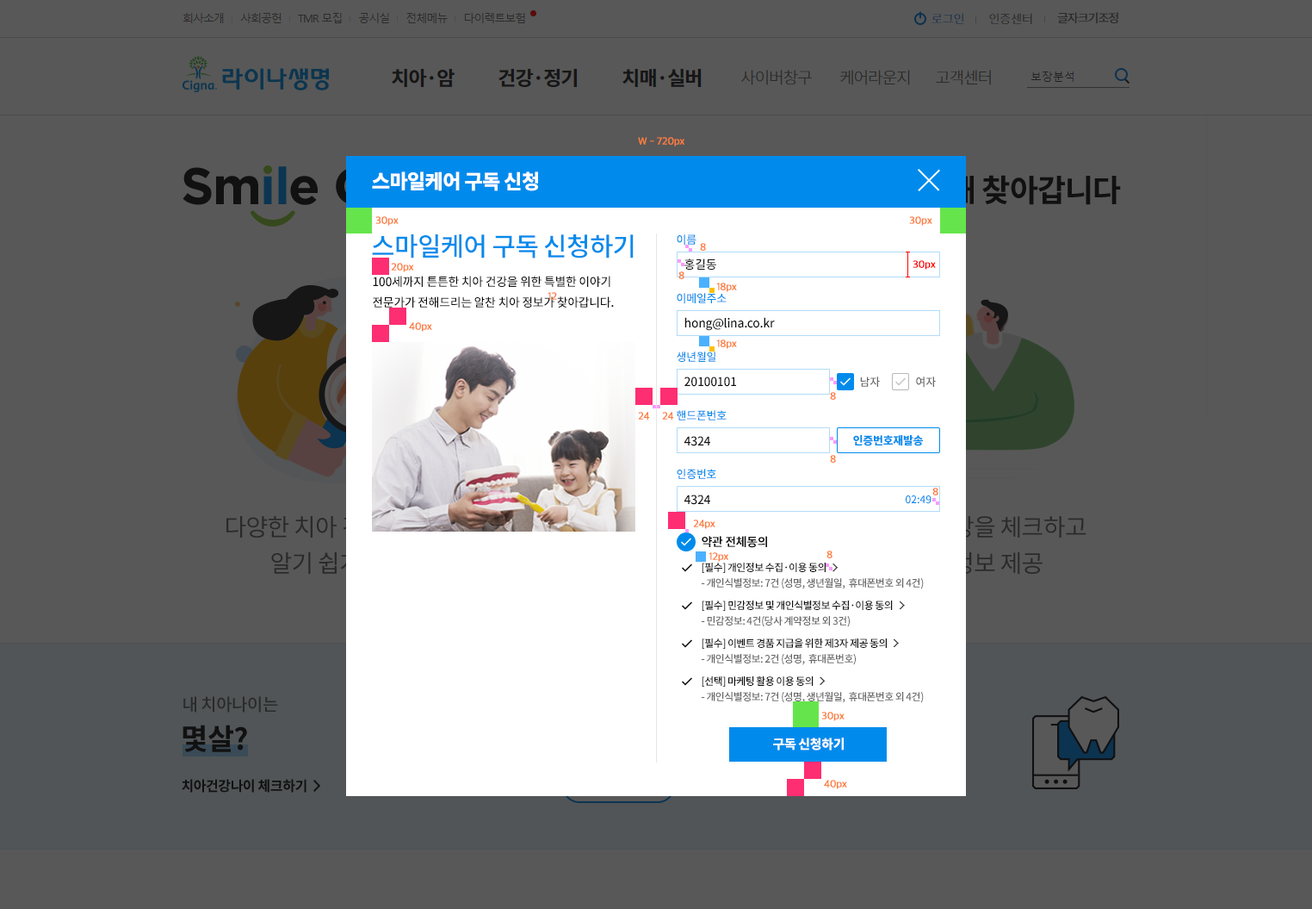
<style>
.page{position:relative;width:1312px;height:909px;background:#585858}
.page>*{position:absolute;margin:0}
.t1{font:10.3px "AppleSDGothicNeoR00";letter-spacing:-0.025em;color:#fd7d3e;font-weight:bold}
.t2{font:19.8px "NotoSansCJKkr-Black";letter-spacing:-0.025em;color:#ffffff}
.t3{font:25.8px "NotoSansCJKkr-Medium";letter-spacing:-0.025em;color:#008bec}
.t4{font:11.2px/58.6px "NotoSansCJKkr-Medium";letter-spacing:-0.025em;color:#008bec}
.t5{font:12.1px "NotoSansCJKkr-Medium";letter-spacing:-0.025em;color:#111111}
.t6{font:10.3px "AppleSDGothicNeoR00";letter-spacing:-0.025em;color:#ff0000;font-weight:bold}
.t7{font:12.1px/20.7px "NotoSansCJKkr-Medium";letter-spacing:-0.025em;color:#111111}
.t8{font:11.2px "NotoSansCJKkr-Medium";letter-spacing:-0.025em;color:#666666}
.t9{font:11.2px "NotoSansCJKkr-Black";letter-spacing:-0.025em;color:#008bec}
.t10{font:10.3px "NotoSansCJKkr-Medium";letter-spacing:-0.01em;color:#008bec}
.t11{font:12.1px "NotoSansCJKkr-Bold";letter-spacing:-0.025em;color:#111111}
.t12{font:10.3px/15.5px "NotoSansCJKkr-Medium";letter-spacing:-0.05em;color:#666666}
.t13{font:10.3px/22.4px "NotoSansCJKkr-Medium";letter-spacing:-0.05em;color:#111111}
.t14{font:12.9px "NotoSansCJKkr-Black";letter-spacing:-0.025em;color:#ffffff}
</style>
<div class="page">
<p class="t1" style="left:638px;top:137px;width:47px;height:9px">W - 720px</p>
<p class="t2" style="left:372px;top:171px;width:166px;height:20px">스마일케어 구독 신청</p>
<p class="t1" style="left:375px;top:216px;width:24px;height:10px">30px</p>
<p class="t1" style="left:909px;top:216px;width:24px;height:10px">30px</p>
<p class="t3" style="left:372px;top:234px;width:262px;height:24px">스마일케어 구독 신청하기</p>
<p class="t4" style="left:677px;top:234px;width:50px;height:245px">이름<br>이메일주소<br>생년월일<br>핸드폰번호<br>인증번호</p>
<p class="t1" style="left:700px;top:243px;width:6px;height:8px">8</p>
<p class="t1" style="left:391px;top:263px;width:23px;height:9px">20px</p>
<p class="t5" style="left:685px;top:258px;width:32px;height:12px">홍길동</p>
<p class="t6" style="left:913px;top:260px;width:23px;height:10px">30px</p>
<p class="t7" style="left:373px;top:276px;width:241px;height:32px">100세까지 튼튼한 치아 건강을 위한 특별한 이야기<br>전문가가 전해드리는 알찬 치아 정보가 찾아갑니다.</p>
<p class="t1" style="left:679px;top:271px;width:6px;height:8px">8</p>
<p class="t1" style="left:548px;top:292px;width:9px;height:8px">12</p>
<p class="t1" style="left:717px;top:282px;width:20px;height:10px">18px</p>
<p class="t5" style="left:685px;top:317px;width:90px;height:14px">hong@lina.co.kr</p>
<p class="t1" style="left:409px;top:322px;width:23px;height:10px">40px</p>
<p class="t1" style="left:717px;top:339px;width:20px;height:10px">18px</p>
<p class="t5" style="left:685px;top:376px;width:51px;height:11px">20100101</p>
<p class="t8" style="left:860px;top:376px;width:76px;height:12px">남자                여자</p>
<p class="t1" style="left:830px;top:392px;width:6px;height:8px">8</p>
<p class="t1" style="left:638px;top:412px;width:12px;height:7px">24</p>
<p class="t1" style="left:662px;top:412px;width:12px;height:7px">24</p>
<p class="t5" style="left:684px;top:436px;width:26px;height:10px">4324</p>
<p class="t9" style="left:853px;top:435px;width:70px;height:11px">인증번호재발송</p>
<p class="t1" style="left:830px;top:455px;width:6px;height:7px">8</p>
<p class="t5" style="left:684px;top:494px;width:26px;height:11px">4324</p>
<p class="t10" style="left:906px;top:495px;width:26px;height:9px">02:49</p>
<p class="t1" style="left:933px;top:487px;width:6px;height:8px">8</p>
<p class="t1" style="left:693px;top:519px;width:23px;height:10px">24px</p>
<p class="t11" style="left:702px;top:536px;width:65px;height:12px">약관 전체동의</p>
<p class="t11" style="left:702px;top:536px;width:65px;height:12px">약관 전체동의</p>
<p class="t1" style="left:709px;top:552px;width:20px;height:9px">12px</p>
<p class="t1" style="left:827px;top:550px;width:6px;height:8px">8</p>
<p class="t12" style="left:702px;top:562px;width:222px;height:141px"><span class="t13">[필수] 개인정보 수집·이용 동의<br></span>- 개인식별정보: 7건 (성명, 생년월일,  휴대폰번호 외 4건)<br><span class="t13">[필수] 민감정보 및 개인식별정보 수집·이용 동의<br></span>- 민감정보: 4건(당사 계약정보 외 3건)<br><span class="t13">[필수] 이벤트 경품 지급을 위한 제3자 제공 동의<br></span>- 개인식별정보: 2건 (성명,  휴대폰번호)<br><span class="t13">[선택] 마케팅 활용 이용 동의<br></span>- 개인식별정보: 7건 (성명, 생년월일,  휴대폰번호 외 4건)</p>
<p class="t12" style="left:702px;top:562px;width:222px;height:141px"><span class="t13">[필수] 개인정보 수집·이용 동의<br></span>- 개인식별정보: 7건 (성명, 생년월일,  휴대폰번호 외 4건)<br><span class="t13">[필수] 민감정보 및 개인식별정보 수집·이용 동의<br></span>- 민감정보: 4건(당사 계약정보 외 3건)<br><span class="t13">[필수] 이벤트 경품 지급을 위한 제3자 제공 동의<br></span>- 개인식별정보: 2건 (성명,  휴대폰번호)<br><span class="t13">[선택] 마케팅 활용 이용 동의<br></span>- 개인식별정보: 7건 (성명, 생년월일,  휴대폰번호 외 4건)</p>
<p class="t1" style="left:822px;top:711px;width:23px;height:10px">30px</p>
<p class="t14" style="left:773px;top:737px;width:71px;height:13px">구독 신청하기</p>
<p class="t1" style="left:824px;top:779px;width:23px;height:10px">40px</p>
</div>
